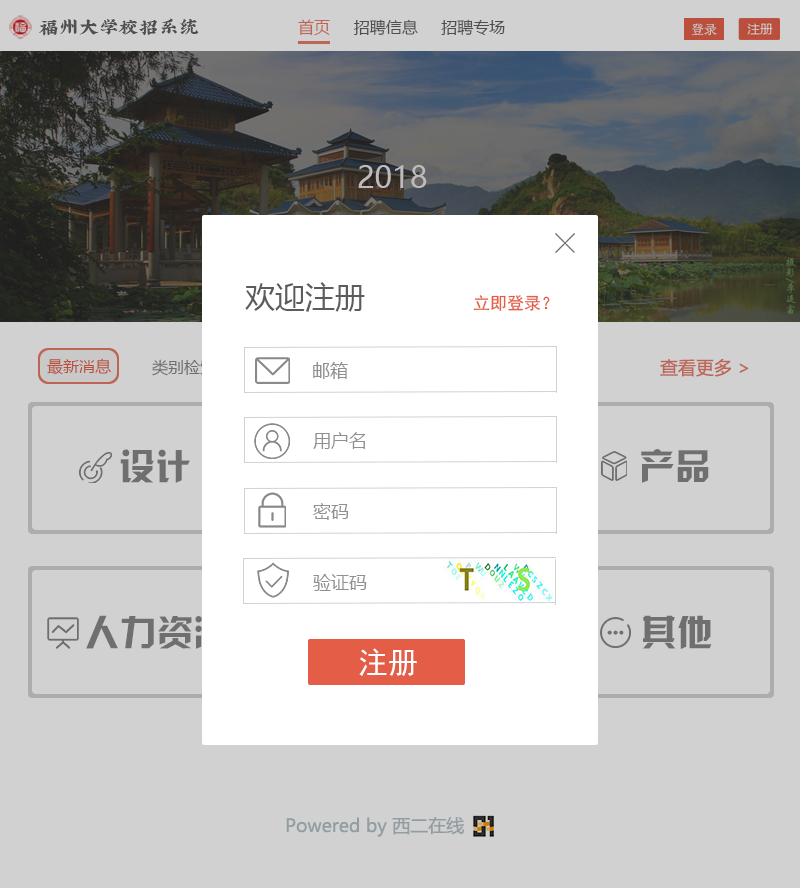
<style>
.page{position:relative;width:800px;height:888px;background:#d0d1d0}
.page>*{position:absolute;margin:0}
.t1{font:20px "XiQuezhaopaiti-Regular";color:#5d5b5b}
.t2{font:16px "MicrosoftYaHei";color:#5d5b5b}
.t3{font:16px "MicrosoftYaHei";color:#e87764}
.t4{font:30px "MicrosoftYaHeiUI";color:#c0bbbb}
.t5{font:30px "MicrosoftYaHei";color:#5d5b5b}
.t6{font:17px "SimHei";color:#e45d47}
.t7{font:16px "MicrosoftYaHeiUI";color:#bb4f3d}
.t8{font:16px "MicrosoftYaHeiUI";color:#848282}
.t9{font:18px "MicrosoftYaHei";color:#938f8f}
.t10{font:18px "MicrosoftYaHei";color:#bc6557}
.t11{font:36px "HYk2gj";letter-spacing:0.01em;color:#868585}
.t12{font:30px "SimHei";color:#ffffff}
.t13{font:18px "MicrosoftYaHei";color:#919da3}
</style>
<div class="page">
<p class="t1" style="left:39px;top:18px;width:160px;height:18px">福州大学校招系统</p>
<p class="t2" style="left:298px;top:19px;width:207px;height:17px"><span class="t3">首页</span>     招聘信息     招聘专场</p>
<p class="t4" style="left:358px;top:165px;width:69px;height:23px">2018</p>
<p class="t5" style="left:245px;top:282px;width:120px;height:30px">欢迎注册</p>
<p class="t6" style="left:473px;top:295px;width:77px;height:16px">立即登录？</p>
<p class="t7" style="left:47px;top:358px;width:64px;height:17px">最新消息</p>
<p class="t8" style="left:152px;top:359px;width:64px;height:17px">类别检索</p>
<p class="t9" style="left:313px;top:362px;width:35px;height:17px">邮箱</p>
<p class="t10" style="left:660px;top:359px;width:89px;height:18px">查看更多 &gt;</p>
<p class="t9" style="left:313px;top:432px;width:53px;height:17px">用户名</p>
<p class="t11" style="left:120px;top:449px;width:70px;height:34px">设计</p>
<p class="t11" style="left:641px;top:449px;width:68px;height:34px">产品</p>
<p class="t9" style="left:313px;top:503px;width:36px;height:17px">密码</p>
<p class="t9" style="left:313px;top:574px;width:54px;height:17px">验证码</p>
<p class="t11" style="left:86px;top:615px;width:141px;height:35px">人力资源</p>
<p class="t11" style="left:643px;top:615px;width:69px;height:34px">其他</p>
<p class="t12" style="left:359px;top:648px;width:58px;height:28px">注册</p>
<p class="t13" style="left:286px;top:816px;width:178px;height:21px">Powered by 西二在线</p>
</div>
